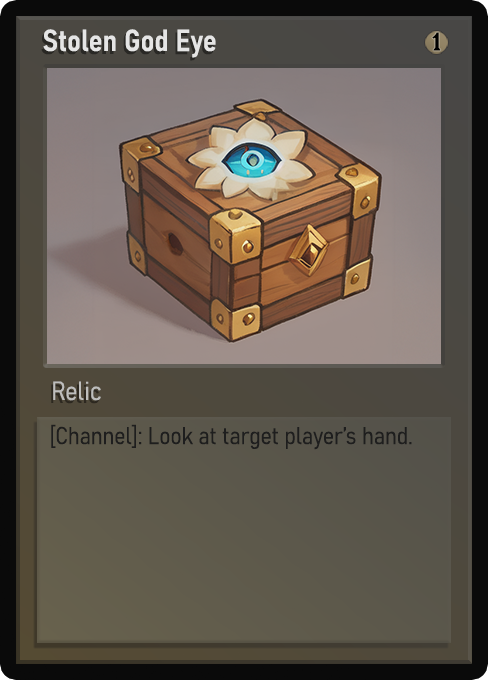
<style>
.page{position:relative;width:488px;height:680px}
.page>*{position:absolute;margin:0}
.t1{font:30px "Bahnschrift-SemiBoldSemiCondensed";color:#f2f2f2;font-weight:bold}
.t2{font:25px "WTRRoycroft";color:#000000;font-weight:bold;scale:1.09 1}
.t3{font:26px "Bahnschrift-LightSemiCondensed";color:#c8c8c8;font-weight:bold}
.t4{font:24px "Bahnschrift-LightSemiCondensed";color:#1e1e1e;font-weight:bold}
</style>
<div class="page">
<p class="t1" style="left:43px;top:29px;width:173px;height:29px;opacity:0.9">Stolen God Eye</p>
<p class="t2" style="left:432px;top:32px;width:9px;height:19px">1</p>
<p class="t3" style="left:53px;top:381px;width:48px;height:20px;opacity:0.9">Relic</p>
<p class="t4" style="left:51px;top:424px;width:361px;height:26px">[Channel]: Look at target player’s hand.</p>
</div>
